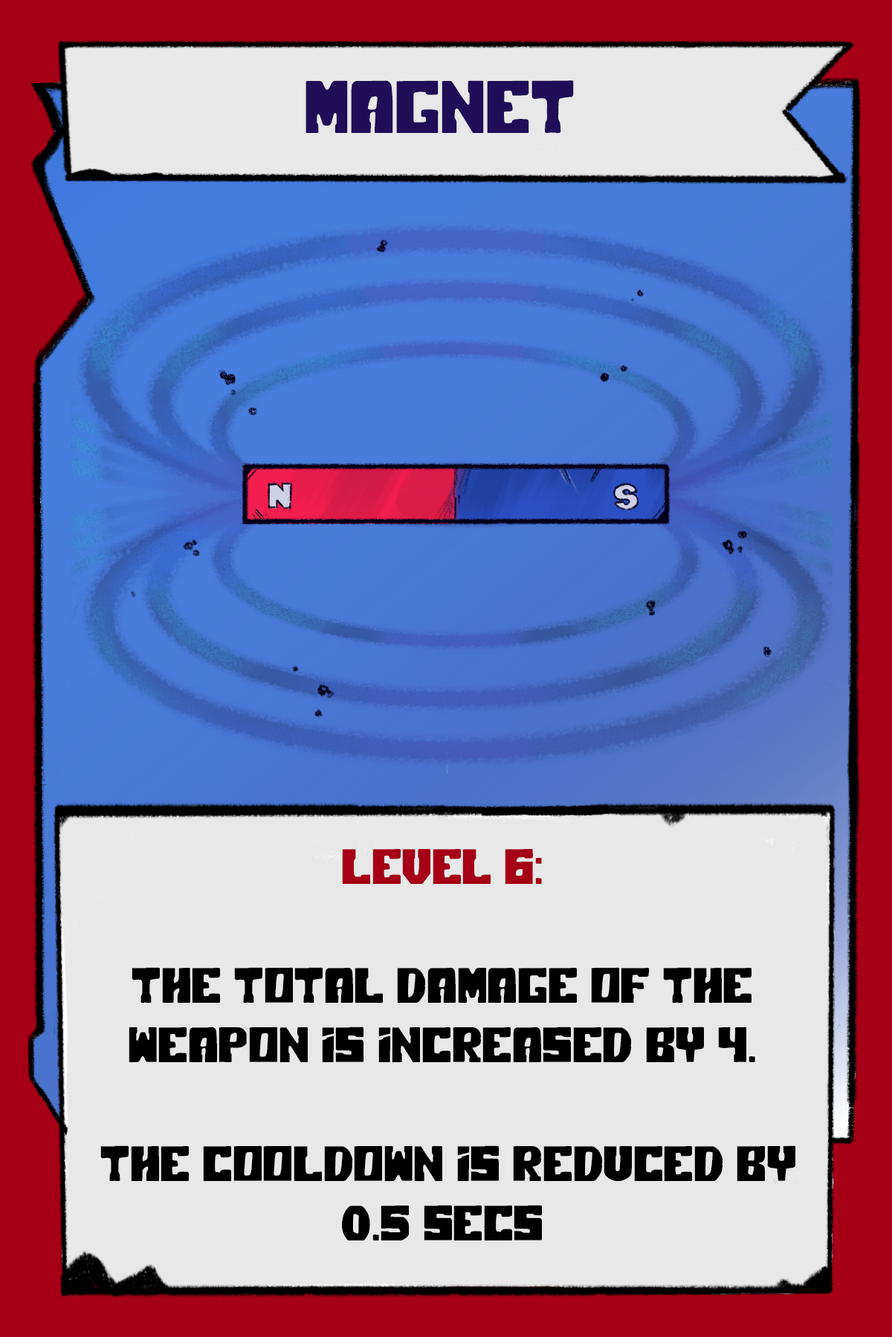
<style>
.page{position:relative;width:892px;height:1337px;background:#e8e8e8}
.page>*{position:absolute;margin:0}
.t1{font:74.3px "PolarPress";color:#1f0e57}
.t2{font:49.5px "PolarPress";color:#000000}
.t3{font:49.5px "PolarPress";color:#a50015}
</style>
<div class="page">
<p class="t1" style="left:305px;top:80px;width:269px;height:53px">MAGNET</p>
<p class="t2" style="left:100px;top:849px;width:695px;height:392px;text-align:center"><span class="t3">LEVEL 6:<br><br></span>The total damage of the weapon is increased by 4.<br><br> the cooldown is reduced by 0.5 secs</p>
</div>
